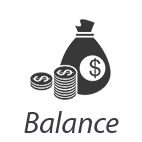
<style>
.page{position:relative;width:142px;height:142px;background:#ffffff}
.page>*{position:absolute;margin:0}
.t1{font:30px "MyriadPro-It";color:#3b3b44}
</style>
<div class="page">
<p class="t1" style="left:24px;top:111px;width:95px;height:22px">Balance</p>
</div>
